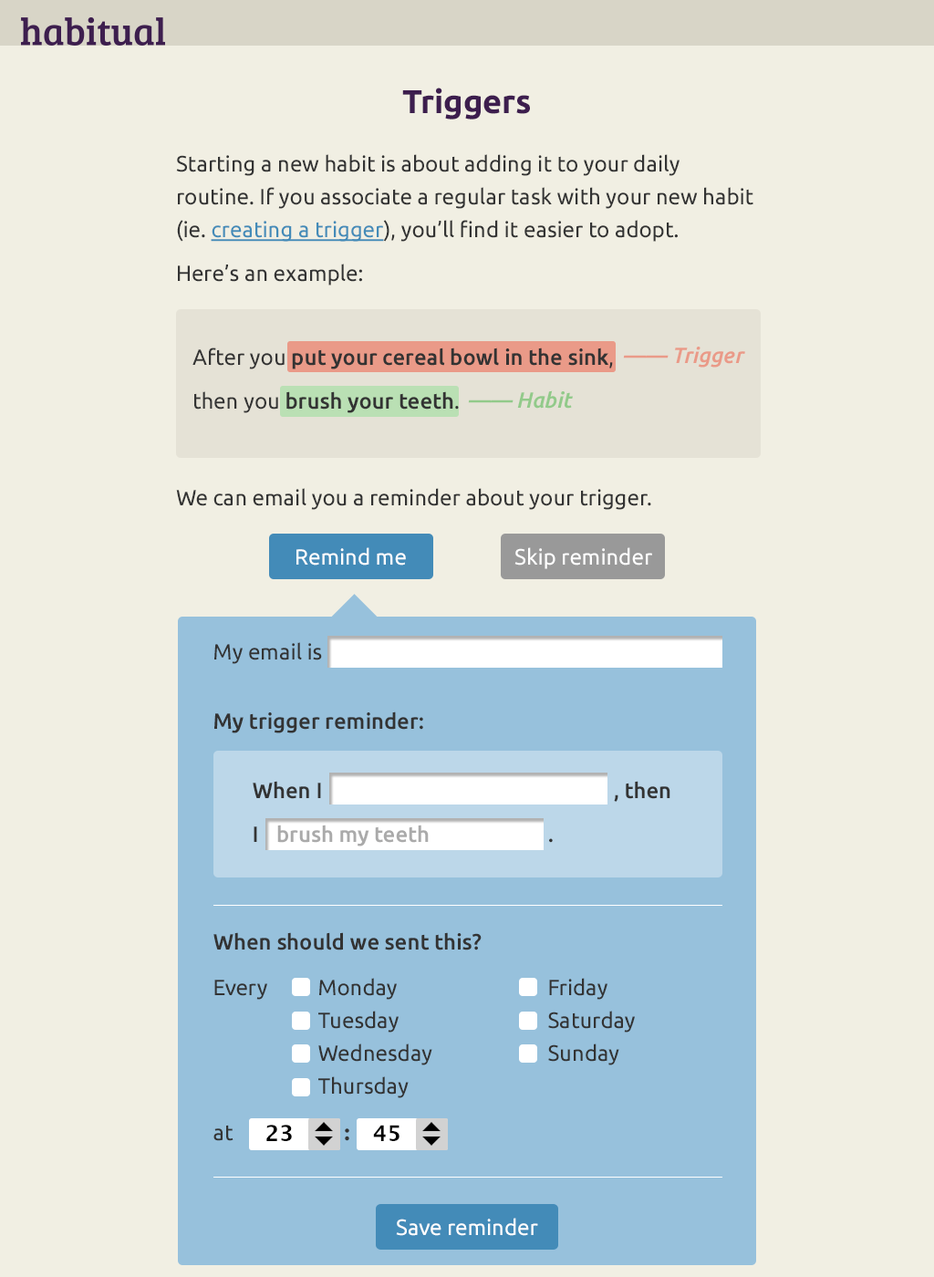
<style>
.page{position:relative;width:934px;height:1277px;background:#f1efe3}
.page>*{position:absolute;margin:0}
.t1{font:32.8px "Ubuntu-Bold";color:#3d1e4e}
.t2{font:21.9px/32.8px "Ubuntu";color:#333333}
.t3{font:21.9px/32.8px "Ubuntu";color:#438bb8;text-decoration:underline}
.t4{font:21.9px/43.8px "Ubuntu";color:#333333}
.t5{font:21.9px/43.8px "Ubuntu-Medium";color:#333333}
.t6{font:21.9px "Ubuntu-MediumItalic";color:#ea9a88}
.t7{font:21.9px "Ubuntu-MediumItalic";color:#92ca8a}
.t8{font:21.9px "Ubuntu";color:#333333}
.t9{font:21.9px "Ubuntu";color:#ffffff}
.t10{font:21.9px "Ubuntu-Medium";color:#333333}
.t11{font:21.9px "Ubuntu-Medium";color:#aaaaaa}
.t12{font:21.9px "Ubuntu-Bold";color:#333333}
.t13{font:21.9px "LucidaGrande-Bold";color:#000000}
</style>
<div class="page">
<p class="t1" style="left:402px;top:88px;width:128px;height:31px">Triggers</p>
<p class="t2" style="left:176px;top:154px;width:577px;height:131px">Starting a new habit is about adding it to your daily routine. If you associate a regular task with your new habit (ie. <span class="t3">creating a trigger</span>), you’ll find it easier to adopt.<br><span class="t4">Here’s an example:</span></p>
<p class="t5" style="left:192px;top:347px;width:421px;height:66px"><span class="t4">After you </span>put your cereal bowl in the sink<span class="t4">,<br>then you </span>brush your teeth<span class="t4">.</span></p>
<p class="t6" style="left:623px;top:347px;width:122px;height:21px">—— Trigger</p>
<p class="t7" style="left:468px;top:390px;width:105px;height:19px">—— Habit</p>
<p class="t8" style="left:176px;top:488px;width:475px;height:22px">We can email you a reminder about your trigger.</p>
<p class="t9" style="left:296px;top:547px;width:110px;height:18px">Remind me</p>
<p class="t9" style="left:514px;top:547px;width:138px;height:22px">Skip reminder</p>
<p class="t8" style="left:214px;top:642px;width:108px;height:22px">My email is</p>
<p class="t10" style="left:214px;top:711px;width:209px;height:22px">My trigger reminder:</p>
<p class="t5" style="left:253px;top:781px;width:417px;height:62px">When I          , then<br>I         .</p>
<p class="t11" style="left:277px;top:824px;width:152px;height:22px">brush my teeth</p>
<p class="t10" style="left:213px;top:932px;width:269px;height:18px">When should we sent this?</p>
<p class="t2" style="left:318px;top:978px;width:317px;height:120px">Monday     Friday<br>Tuesday     Saturday<br>Wednesday    Sunday<br>Thursday</p>
<p class="t8" style="left:214px;top:980px;width:53px;height:20px">Every</p>
<p class="t8" style="left:213px;top:1125px;width:136px;height:16px">at    <span class="t12">:</span></p>
<p class="t13" style="left:266px;top:1125px;width:26px;height:16px">23</p>
<p class="t13" style="left:373px;top:1125px;width:26px;height:16px">45</p>
<p class="t9" style="left:396px;top:1218px;width:142px;height:18px">Save reminder</p>
</div>
